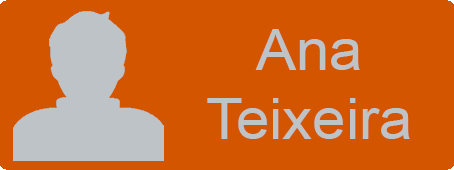
<style>
.page{position:relative;width:454px;height:170px;background:#d35500}
.page>*{position:absolute;margin:0}
.t1{font:57.1px "ArialMT";color:#bdc3c7;scale:1.05 1}
</style>
<div class="page">
<p class="t1" style="left:207px;top:29px;width:203px;height:110px;text-align:center">Ana<br>Teixeira</p>
</div>
